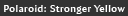
<style>
.page{position:relative;width:128px;height:16px;background:#333333}
.page>*{position:absolute;margin:0}
.t1{font:10px "AmiraParadiso";letter-spacing:0.05em;color:#ffffff}
</style>
<div class="page">
<p class="t1" style="left:4px;top:5px;width:121px;height:9px">Polaroid: Stronger Yellow</p>
</div>
